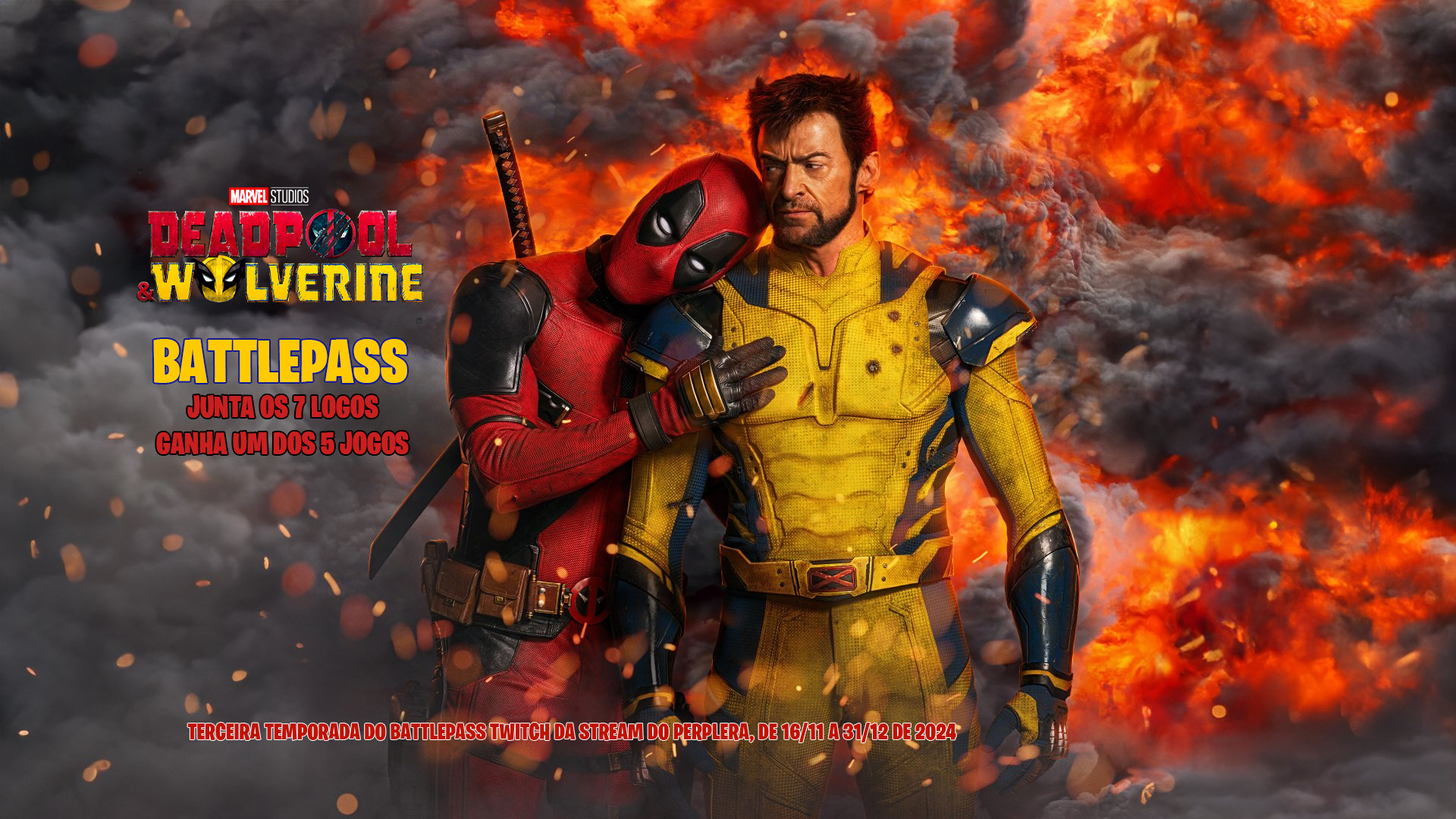
<style>
.page{position:relative;width:1456px;height:819px}
.page>*{position:absolute;margin:0}
.t1{font:60.7px "BurbankBigCondensed-Black";color:#ffcb00}
.t2{font:30.3px "BurbankBigCondensed-Black";color:#c91f20}
.t3{font:22.7px "BurbankBigCondensed-Black";color:#bf1202}
</style>
<div class="page">
<p class="t1" style="left:153px;top:339px;width:254px;height:44px">BATTLEPASS</p>
<p class="t2" style="left:156px;top:395px;width:253px;height:59px;text-align:center">JUNTA OS 7 LOGOS<br>GANHA UM DOS 5 JOGOS</p>
<p class="t3" style="left:187px;top:723px;width:769px;height:19px">TERCEIRA TEMPORADA DO BATTLEPASS TWITCH DA STREAM DO PERPLERA, DE 16/11 A 31/12 DE 2024</p>
</div>
